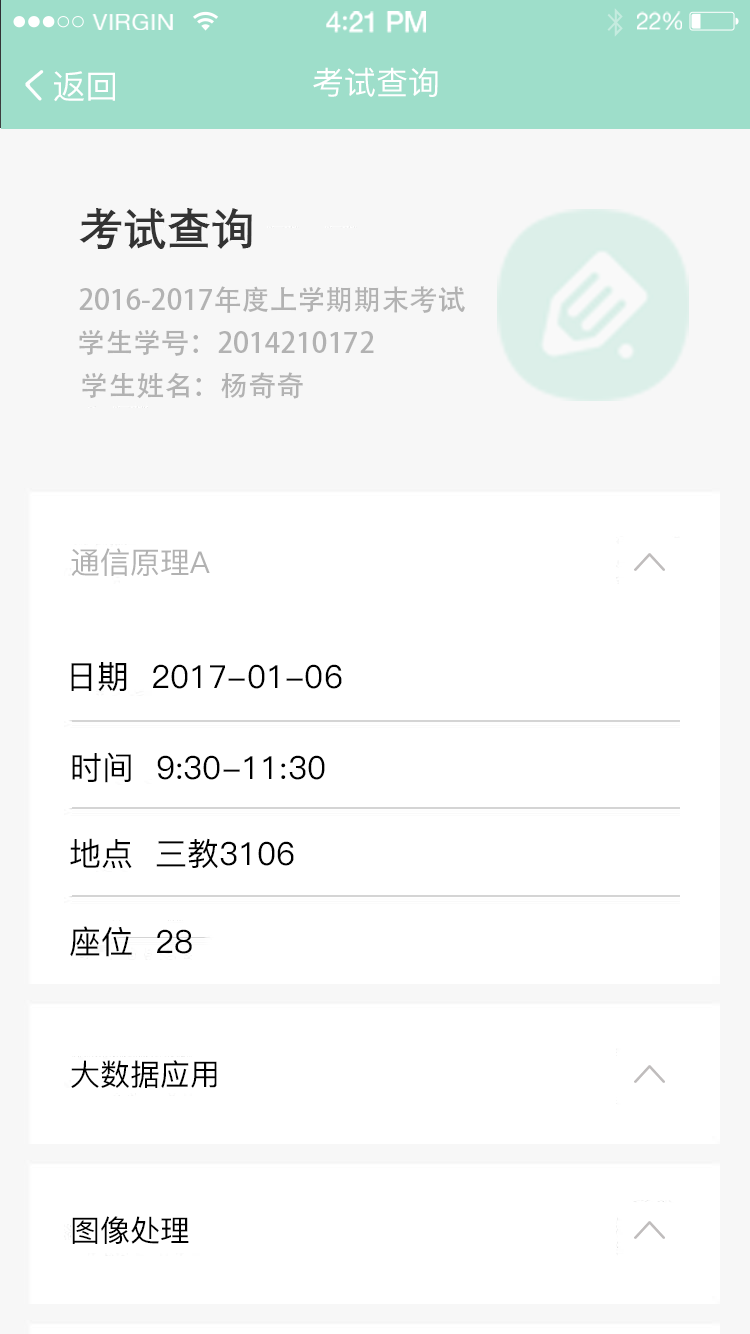
<style>
.page{position:relative;width:750px;height:1334px;background:#ffffff}
.page>*{position:absolute;margin:0}
.t1{font:23.4px "HelveticaNeue";letter-spacing:0.02em;color:#ffffff}
.t2{font:28.1px "HelveticaNeue-Medium";letter-spacing:-0.02em;color:#ffffff}
.t3{font:28.1px "Avenir-Medium";letter-spacing:-0.02em;color:#ffffff}
.t4{font:23.5px "HelveticaNeue";letter-spacing:-0.02em;color:#ffffff}
.t5{font:33.3px "PingFangSC-Medium";color:#ffffff}
.t6{font:32px "PingFangSC-Medium";color:#ffffff}
.t7{font:44px "DengXian-Bold";color:#333333}
.t8{font:28px "AdobeHeitiStd-Regular";color:#b2b2b2}
.t9{font:30px "PingFangSC-Medium";color:#b2b2b2}
.t10{font:32px "PingFangSC-Medium";color:#000000}
.t11{font:30px "PingFangSC-Medium";color:#000000}
</style>
<div class="page">
<p class="t1" style="left:92px;top:14px;width:81px;height:16px">VIRGIN</p>
<p class="t2" style="left:326px;top:11px;width:100px;height:22px">4<span class="t3">:</span>21 PM</p>
<p class="t4" style="left:637px;top:11px;width:45px;height:19px">22%</p>
<p class="t5" style="left:54px;top:71px;width:61px;height:31px">返回</p>
<p class="t6" style="left:313px;top:67px;width:125px;height:30px">考试查询</p>
<p class="t7" style="left:79px;top:208px;width:173px;height:41px">考试查询</p>
<p class="t8" style="left:79px;top:286px;width:386px;height:27px">2016-2017年度上学期期末考试</p>
<p class="t8" style="left:79px;top:329px;width:295px;height:27px">学生学号：2014210172</p>
<p class="t8" style="left:82px;top:372px;width:221px;height:27px">学生姓名：杨奇奇</p>
<p class="t9" style="left:71px;top:548px;width:139px;height:28px">通信原理A</p>
<p class="t10" style="left:71px;top:662px;width:271px;height:30px">日期  2017-01-06</p>
<p class="t10" style="left:72px;top:752px;width:253px;height:31px">时间  9:30-11:30</p>
<p class="t10" style="left:70px;top:838px;width:224px;height:31px">地点  三教3106</p>
<p class="t10" style="left:70px;top:926px;width:122px;height:31px">座位  28</p>
<p class="t11" style="left:71px;top:1060px;width:146px;height:28px">大数据应用</p>
<p class="t11" style="left:72px;top:1216px;width:117px;height:28px">图像处理</p>
</div>
